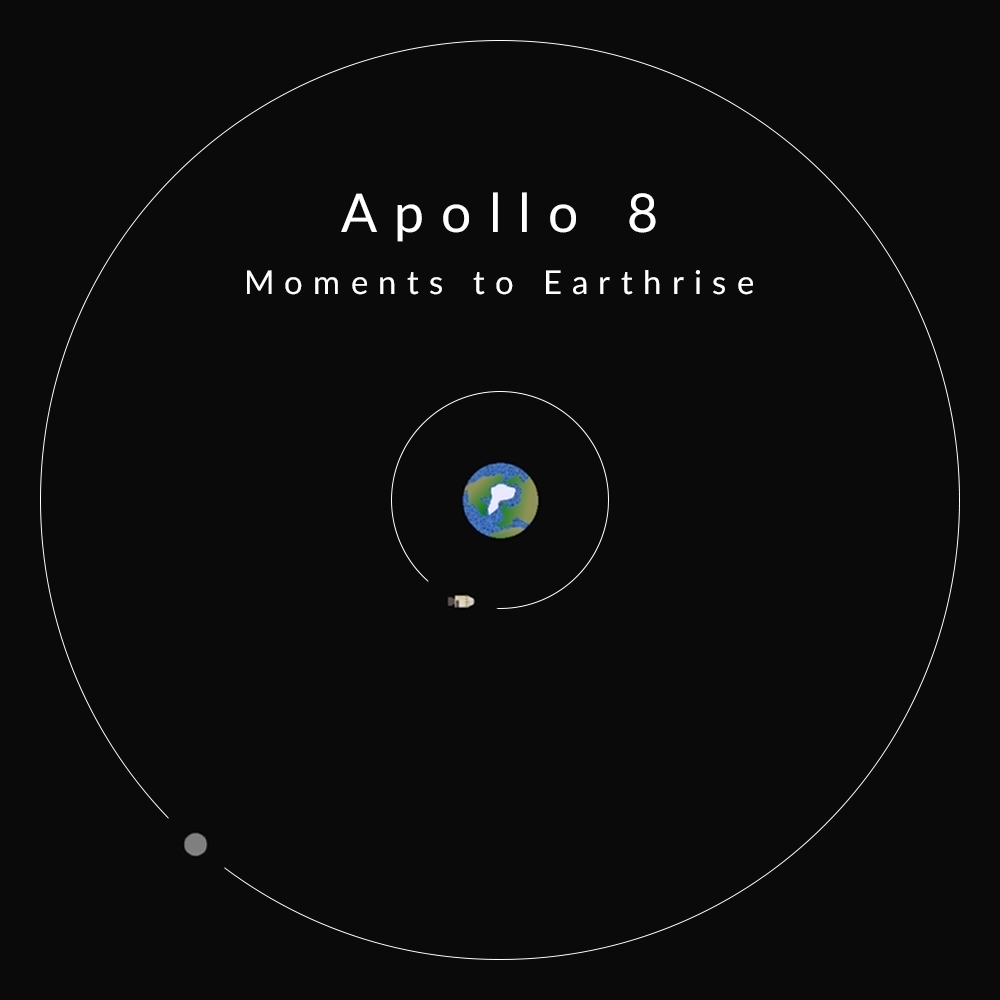
<style>
.page{position:relative;width:1000px;height:1000px;background:#0a0a0a}
.page>*{position:absolute;margin:0}
.t1{font:53.6px "Lato-Regular";letter-spacing:0.32em;color:#ffffff}
.t2{font:32.7px "Lato-Regular";letter-spacing:0.32em;color:#ffffff}
</style>
<div class="page">
<p class="t1" style="left:341px;top:192px;width:315px;height:50px">Apollo 8</p>
<p class="t2" style="left:247px;top:270px;width:506px;height:25px">Moments to Earthrise</p>
</div>
